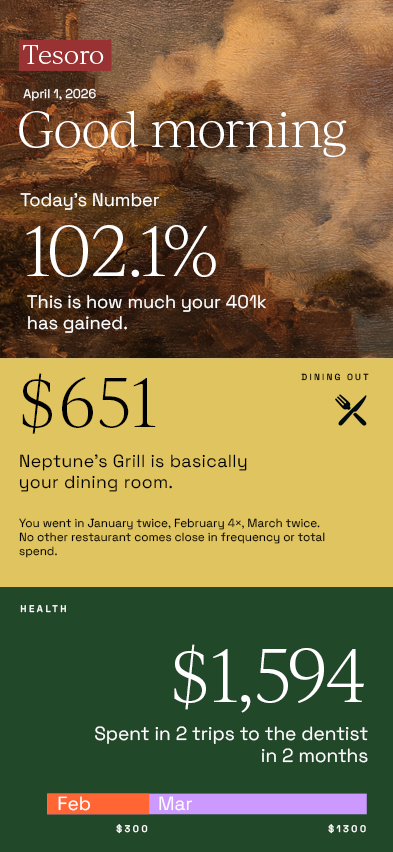
<style>
.page{position:relative;width:393px;height:852px;background:#22482a}
.page>*{position:absolute;margin:0}
.t1{font:25.2px "IvyJournal-Light";letter-spacing:0.02em;color:#ffffff}
.t2{font:12.6px "SpaceGrotesk-Regular";color:#ffffff}
.t3{font:48.6px "IvyJournal-Light";letter-spacing:-0.02em;color:#ffffff}
.t4{font:18.2px "SpaceGrotesk-Regular";color:#ffffff}
.t5{font:69px "IvyJournal-Light";letter-spacing:-0.02em;color:#ffffff;text-transform:uppercase}
.t6{font:18.2px/14.3px "SpaceGrotesk-Regular";color:#ffffff}
.t7{font:66.9px "IvyJournal-Light";letter-spacing:0.02em;color:#000000;text-transform:uppercase}
.t8{font:8.8px "SpaceGrotesk-Medium";letter-spacing:0.24em;color:#000000}
.t9{font:17.6px/14.8px "SpaceGrotesk-Regular";letter-spacing:0.02em;color:#000000}
.t10{font:11.8px "SpaceGrotesk-Regular";color:#000000}
.t11{font:9.5px "SpaceGrotesk-Medium";letter-spacing:0.24em;color:#ffffff}
.t12{font:72.2px "IvyJournal-Light";letter-spacing:-0.02em;color:#ffffff;text-transform:uppercase}
.t13{font:19px/14.9px "SpaceGrotesk-Regular";color:#ffffff}
.t14{font:19px "SpaceGrotesk-Regular";color:#ffffff}
</style>
<div class="page">
<p class="t1" style="left:23px;top:45px;width:81px;height:19px">Tesoro</p>
<p class="t2" style="left:23px;top:88px;width:73px;height:13px">April 1, 2026</p>
<p class="t3" style="left:19px;top:110px;width:328px;height:47px">Good morning</p>
<p class="t4" style="left:20px;top:193px;width:140px;height:17px">Today’s Number</p>
<p class="t5" style="left:26px;top:225px;width:190px;height:52px">102.1%</p>
<p class="t6" style="left:27px;top:294px;width:240px;height:39px">This is how much your 401k<br>has gained.</p>
<p class="t7" style="left:22px;top:373px;width:134px;height:61px">$651</p>
<p class="t8" style="left:301px;top:373px;width:68px;height:8px">DINING OUT</p>
<p class="t9" style="left:19px;top:454px;width:228px;height:38px">Neptune's Grill is basically <br>your dining room.</p>
<p class="t10" style="left:19px;top:518px;width:306px;height:40px">You went in January twice, February 4×, March twice. No other restaurant comes close in frequency or total spend.</p>
<p class="t11" style="left:20px;top:605px;width:46px;height:8px">HEALTH</p>
<p class="t12" style="left:174px;top:644px;width:190px;height:69px">$1,594</p>
<p class="t13" style="left:95px;top:726px;width:273px;height:37px;text-align:right">Spent in 2 trips to the dentist<br>in 2 months</p>
<p class="t14" style="left:58px;top:796px;width:33px;height:15px">Feb</p>
<p class="t14" style="left:159px;top:796px;width:34px;height:15px">Mar</p>
<p class="t11" style="left:116px;top:824px;width:32px;height:10px">$300</p>
<p class="t11" style="left:328px;top:824px;width:38px;height:10px">$1300</p>
</div>
